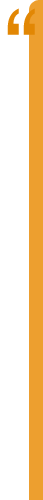
<style>
.page{position:relative;width:43px;height:500px;background:#ffffff}
.page>*{position:absolute;margin:0}
.t1{font:84.4px "GenevaCY";color:#e28704}
</style>
<div class="page">
<p class="t1" style="left:7px;top:8px;width:28px;height:27px">“</p>
</div>
